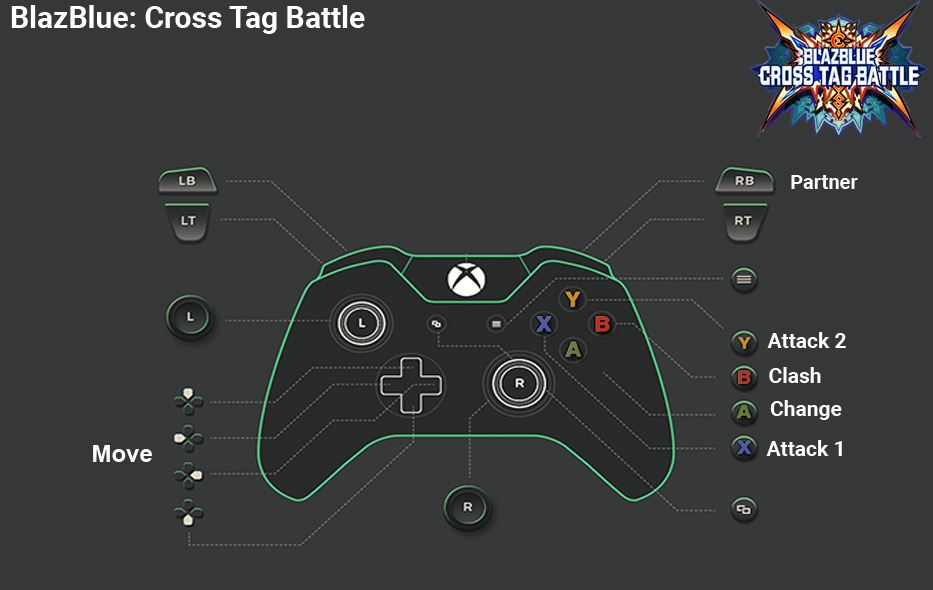
<style>
.page{position:relative;width:933px;height:590px;background:#363838}
.page>*{position:absolute;margin:0}
.t1{font:30px "Roboto-Bold";color:#ffffff}
.t2{font:20px "Roboto-Bold";color:#ffffff}
.t3{font:21px "Roboto-Bold";color:#ffffff}
.t4{font:24px "Arial-BoldMT";color:#fefefe}
</style>
<div class="page">
<p class="t1" style="left:11px;top:5px;width:354px;height:29px">BlazBlue: Cross Tag Battle</p>
<p class="t2" style="left:791px;top:175px;width:67px;height:14px">Partner</p>
<p class="t3" style="left:767px;top:332px;width:79px;height:16px">Attack 2</p>
<p class="t3" style="left:769px;top:367px;width:52px;height:16px">Clash</p>
<p class="t3" style="left:770px;top:400px;width:72px;height:20px">Change</p>
<p class="t4" style="left:93px;top:445px;width:59px;height:17px">Move</p>
<p class="t3" style="left:766px;top:440px;width:76px;height:16px">Attack 1</p>
</div>
